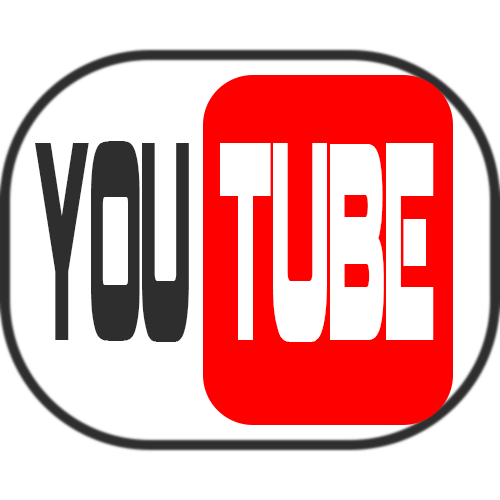
<style>
.page{position:relative;width:500px;height:500px;background:#ffffff}
.page>*{position:absolute;margin:0}
.t1{font:277.5px "Coalition";color:#2e2e2e;scale:0.19 1}
.t2{font:277.5px "Coalition";color:#ffffff;scale:0.22 1}
</style>
<div class="page">
<p class="t1" style="left:35px;top:141px;width:154px;height:201px">you</p>
<p class="t2" style="left:220px;top:143px;width:214px;height:199px">tube</p>
</div>
